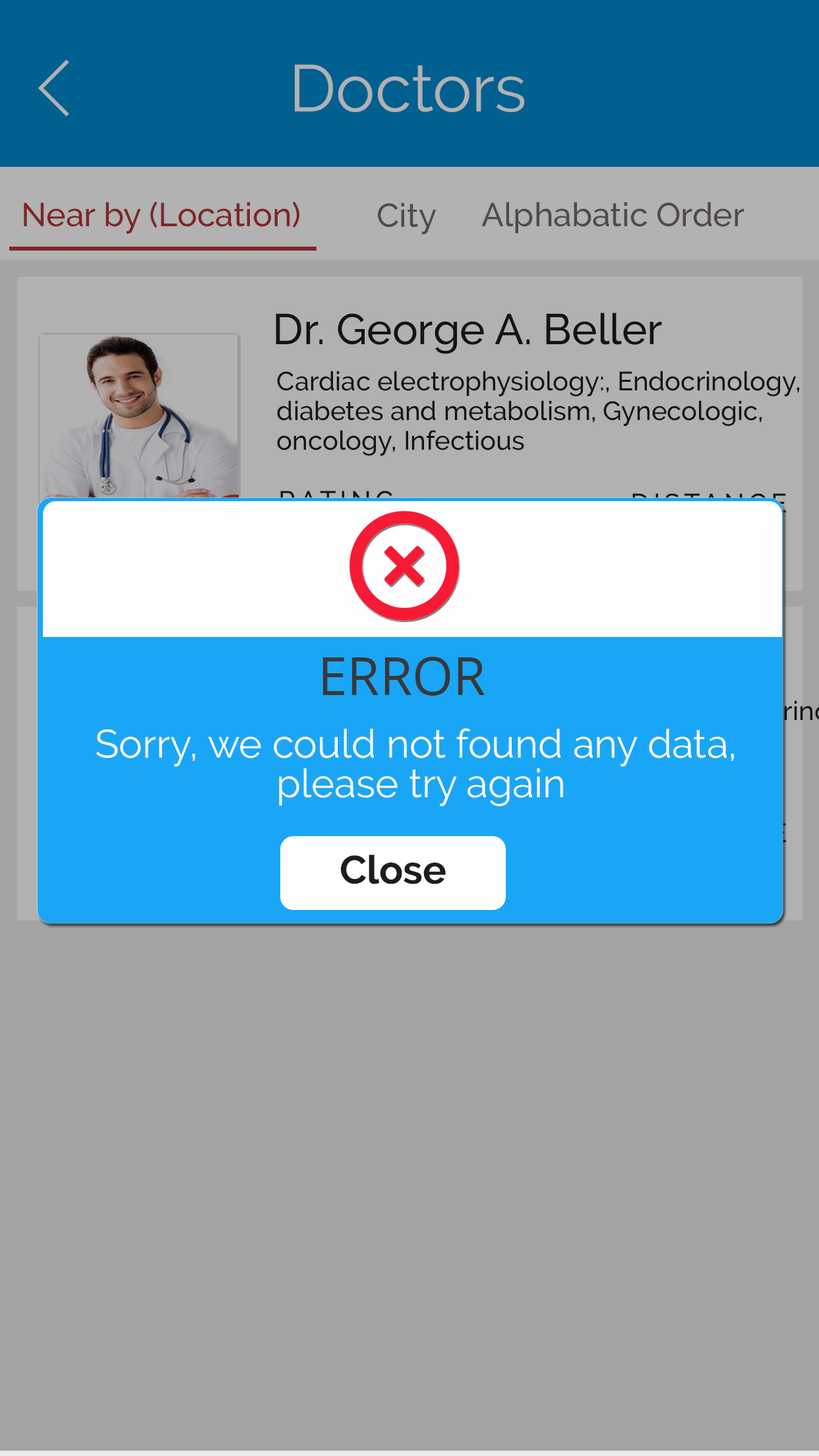
<style>
.page{position:relative;width:819px;height:1456px;background:#a4a4a4}
.page>*{position:absolute;margin:0}
.t1{font:65.9px "Raleway-Regular";color:#b1b1b2}
.t2{font:33px "Raleway-Medium";color:#802426}
.t3{font:33px "Raleway-Medium";color:#504a4b}
.t4{font:42.9px "Raleway-Medium";color:#1d1d1d}
.t5{font:26.4px/29.7px "Raleway-Medium";color:#1d1d1d}
.t6{font:26.4px "Raleway-Medium";letter-spacing:0.15em}
.t7{font:52.8px "OpenSans";color:#383838}
.t8{font:39.6px/39.6px "Raleway-Regular";color:#fefbfb}
.t9{font:39.6px "Raleway-Bold";color:#1d1d1d}
</style>
<div class="page">
<p class="t1" style="left:295px;top:65px;width:229px;height:47px">Doctors</p>
<p class="t2" style="left:24px;top:201px;width:275px;height:33px">Near by (Location)</p>
<p class="t3" style="left:378px;top:202px;width:59px;height:33px">City</p>
<p class="t3" style="left:481px;top:202px;width:263px;height:31px">Alphabatic Order</p>
<p class="t4" style="left:276px;top:313px;width:386px;height:41px">Dr. George A. Beller</p>
<p class="t5" style="left:277px;top:371px;width:522px;height:85px">Cardiac electrophysiology:, Endocrinology,<br>diabetes and metabolism, Gynecologic, <br>oncology, Infectious</p>
<p class="t6" style="left:280px;top:491px;width:113px;height:19px">RATING</p>
<p class="t7" style="left:322px;top:657px;width:163px;height:39px">ERROR</p>
<p class="t8" style="left:96px;top:728px;width:638px;height:78px;text-align:center">Sorry, we could not found any data, <br>please try again</p>
<p class="t9" style="left:340px;top:855px;width:106px;height:29px">Close</p>
</div>
